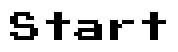
<style>
.page{position:relative;width:178px;height:52px;background:#ffffff}
.page>*{position:absolute;margin:0}
.t1{font:32px "PressStart2P";color:#000000}
</style>
<div class="page">
<p class="t1" style="left:10px;top:12px;width:156px;height:28px">Start</p>
</div>
